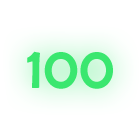
<style>
.page{position:relative;width:140px;height:140px;background:#ffffff}
.page>*{position:absolute;margin:0}
.t1{font:60px "BerlinSansFB-Reg";color:#3ae76f}
</style>
<div class="page">
<p class="t1" style="left:27px;top:51px;width:86px;height:38px">100</p>
</div>
